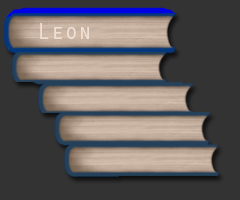
<style>
.page{position:relative;width:240px;height:200px;background:#333333}
.page>*{position:absolute;margin:0}
.t1{font:23px "OratorStd";color:#f0e1d7}
</style>
<div class="page">
<p class="t1" style="left:40px;top:23px;width:49px;height:16px">Leon</p>
</div>
